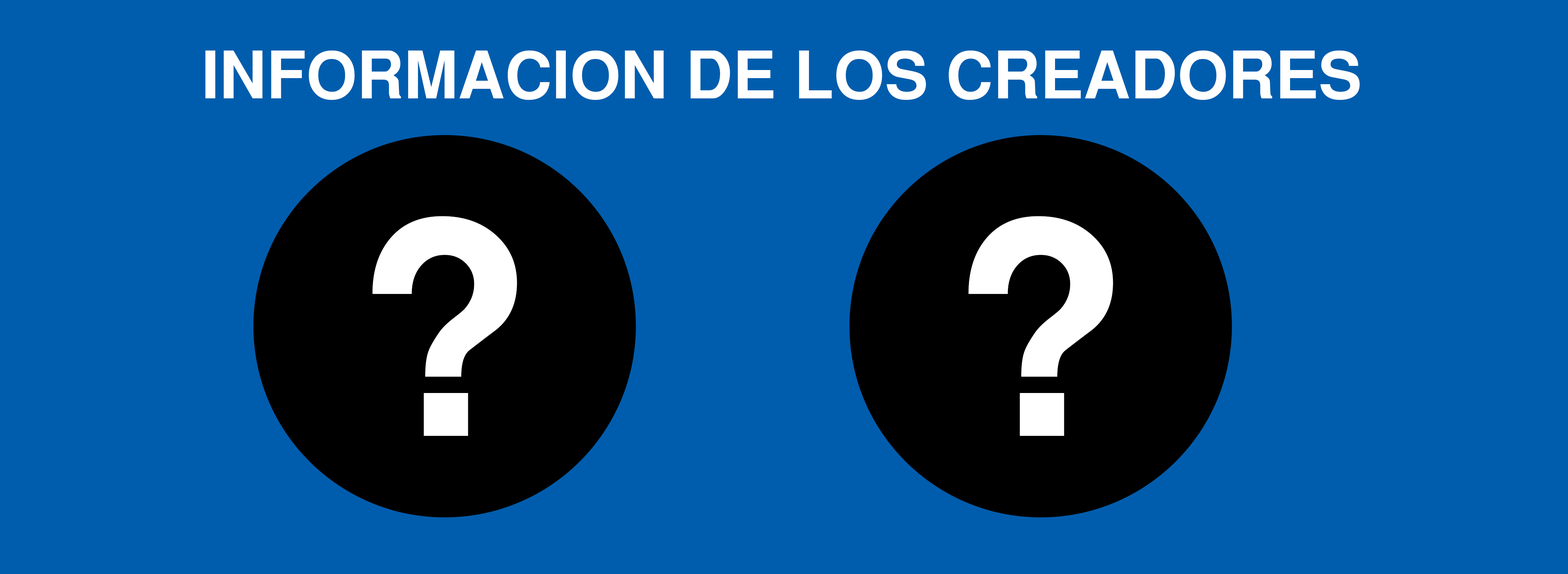
<style>
.page{position:relative;width:1568px;height:574px;background:#005dad}
.page>*{position:absolute;margin:0}
.t1{font:65.1px "SansSerifBold";color:#ffffff}
.t2{font:294.8px "SansSerifBold";color:#ffffff}
</style>
<div class="page">
<p class="t1" style="left:205px;top:51px;width:1155px;height:49px">INFORMACION DE LOS CREADORES</p>
<p class="t2" style="left:372px;top:216px;width:145px;height:220px">?</p>
<p class="t2" style="left:969px;top:216px;width:144px;height:220px">?</p>
</div>
